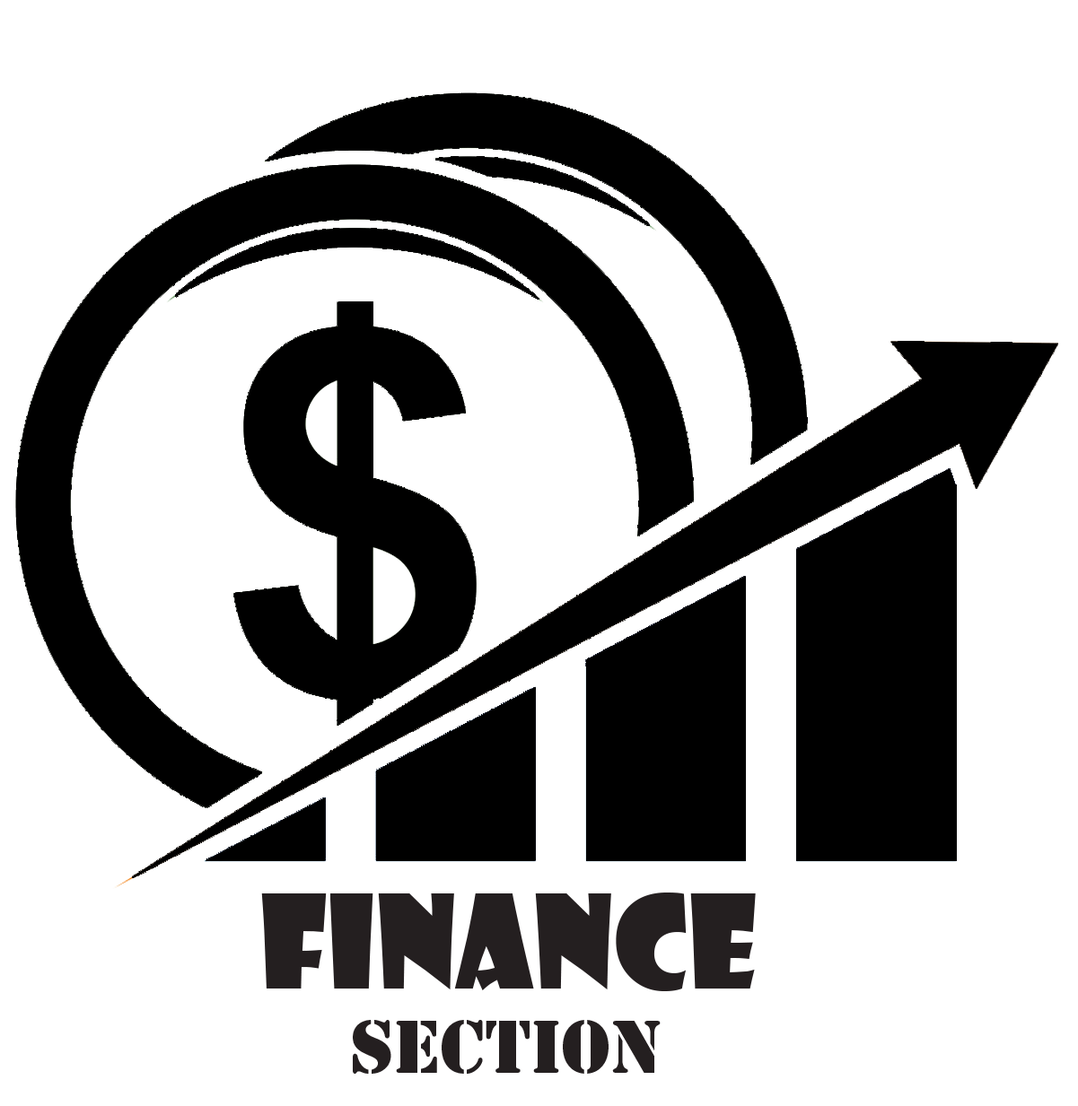
<style>
.page{position:relative;width:1078px;height:1106px;background:#ffffff}
.page>*{position:absolute;margin:0}
.t1{font:126.5px "ShowcardGothic-Reg";color:#241f20}
.t2{font:69.9px "StencilStd";color:#241f20}
</style>
<div class="page">
<p class="t1" style="left:261px;top:893px;width:495px;height:181px">Finance<br>     <span class="t2">Section</span></p>
</div>
